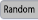
<style>
.page{position:relative;width:38px;height:20px;background:#bfbfbf}
.page>*{position:absolute;margin:0}
.t1{font:10.5px "MyriadPro-Regular";color:#000000;font-weight:bold;scale:0.81 1}
</style>
<div class="page">
<p class="t1" style="left:4px;top:5px;width:31px;height:8px">Random</p>
</div>
